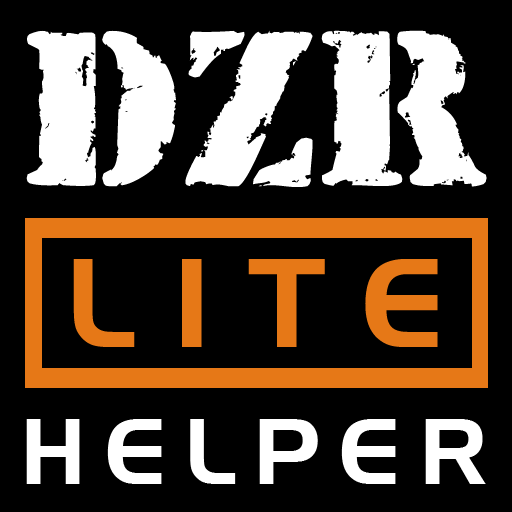
<style>
.page{position:relative;width:512px;height:512px;background:#000000}
.page>*{position:absolute;margin:0}
.t1{font:216.3px "_DozoRfont";color:#ffffff;text-transform:uppercase}
.t2{font:122.1px "HandelGothicBT-Regular";letter-spacing:0.31em;color:#e67817;text-transform:uppercase}
.t3{font:91px "HandelGothicBT-Regular";letter-spacing:0.2em;color:#ffffff;text-transform:uppercase}
</style>
<div class="page">
<p class="t1" style="left:26px;top:30px;width:461px;height:157px">Dzr</p>
<p class="t2" style="left:73px;top:259px;width:365px;height:88px">lite</p>
<p class="t3" style="left:26px;top:419px;width:460px;height:65px">helper</p>
</div>
